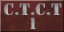
<style>
.page{position:relative;width:64px;height:32px}
.page>*{position:absolute;margin:0}
.t1{font:17.3px "Army";color:#9b9b9b}
</style>
<div class="page">
<p class="t1" style="left:4px;top:3px;width:58px;height:12px">C.T.C.T</p>
</div>
